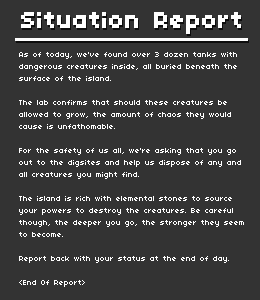
<style>
.page{position:relative;width:260px;height:300px;background:#333333}
.page>*{position:absolute;margin:0}
.t1{font:24px "04b03";color:#ffffff;font-weight:bold}
.t2{font:8px/12px "04b03";color:#ffffff}
</style>
<div class="page">
<p class="t1" style="left:21px;top:12px;width:220px;height:22px">Situation Report</p>
<p class="t2" style="left:19px;top:52px;width:225px;height:235px">As of today, we've found over 3 dozen tanks with dangerous creatures inside, all buried beneath the surface of the island.<br><br>The lab confirms that should these creatures be allowed to grow, the amount of chaos they would cause is unfathomable.<br><br>For the safety of us all, we're asking that you go out to the digsites and help us dispose of any and all creatures you might find.<br><br>The island is rich with elemental stones to source your powers to destroy the creatures. Be careful though, the deeper you go, the stronger they seem to become.<br><br>Report back with your status at the end of day.<br><br>&lt;End Of Report&gt;</p>
</div>
